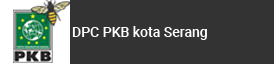
<style>
.page{position:relative;width:274px;height:64px;background:#333333}
.page>*{position:absolute;margin:0}
.t1{font:14px "Roboto-Medium";color:#fefefe}
</style>
<div class="page">
<p class="t1" style="left:72px;top:26px;width:135px;height:14px">DPC PKB kota Serang</p>
</div>
